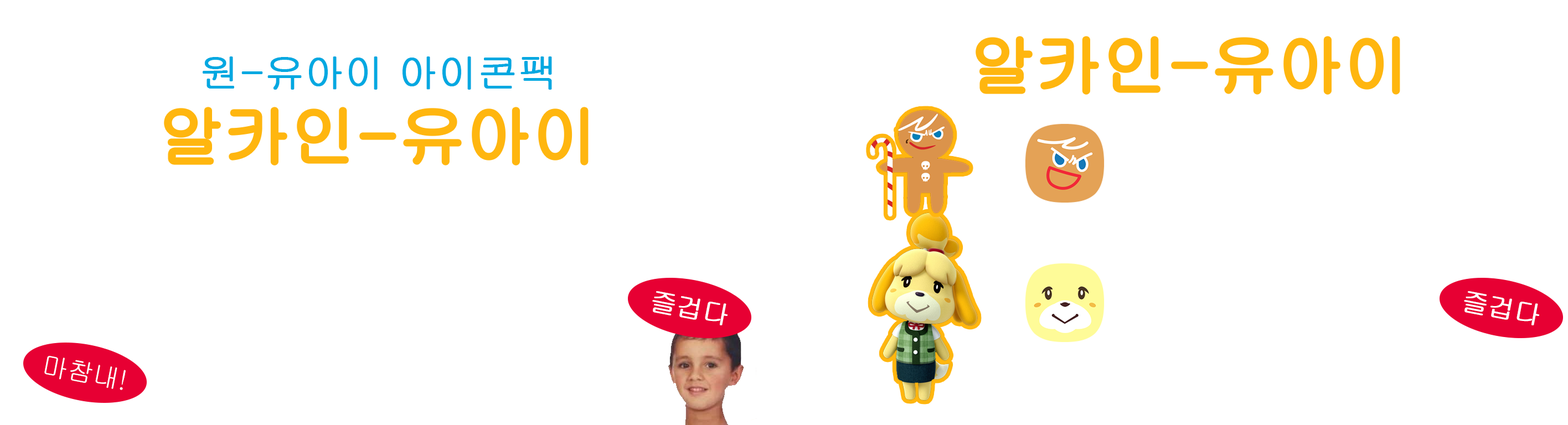
<style>
.page{position:relative;width:1568px;height:425px;background:#ffffff}
.page>*{position:absolute;margin:0}
.t1{font:66.4px "Gulim";letter-spacing:-0.025em;color:#ffb60f;font-weight:bold}
.t2{font:39.9px "Gulim";letter-spacing:-0.025em;color:#00a8e1;font-weight:bold}
.t3{font:26.6px "Gulim";letter-spacing:-0.025em;color:#ffffff;font-weight:bold}
.t4{font:26.6px "Gulim";letter-spacing:-0.025em;color:#ffffff}
</style>
<div class="page">
<p class="t1" style="left:977px;top:37px;width:422px;height:57px">알카인-유아이</p>
<p class="t2" style="left:203px;top:56px;width:349px;height:34px">원-유아이 아이콘팩</p>
<p class="t1" style="left:165px;top:108px;width:422px;height:56px">알카인-유아이</p>
<p class="t3" style="left:652px;top:291px;width:76px;height:35px;rotate:11deg">즐겁다</p>
<p class="t3" style="left:1464px;top:291px;width:75px;height:35px;rotate:11deg">즐겁다</p>
<p class="t4" style="left:44px;top:356px;width:82px;height:34px;rotate:11deg">마참내!</p>
</div>
